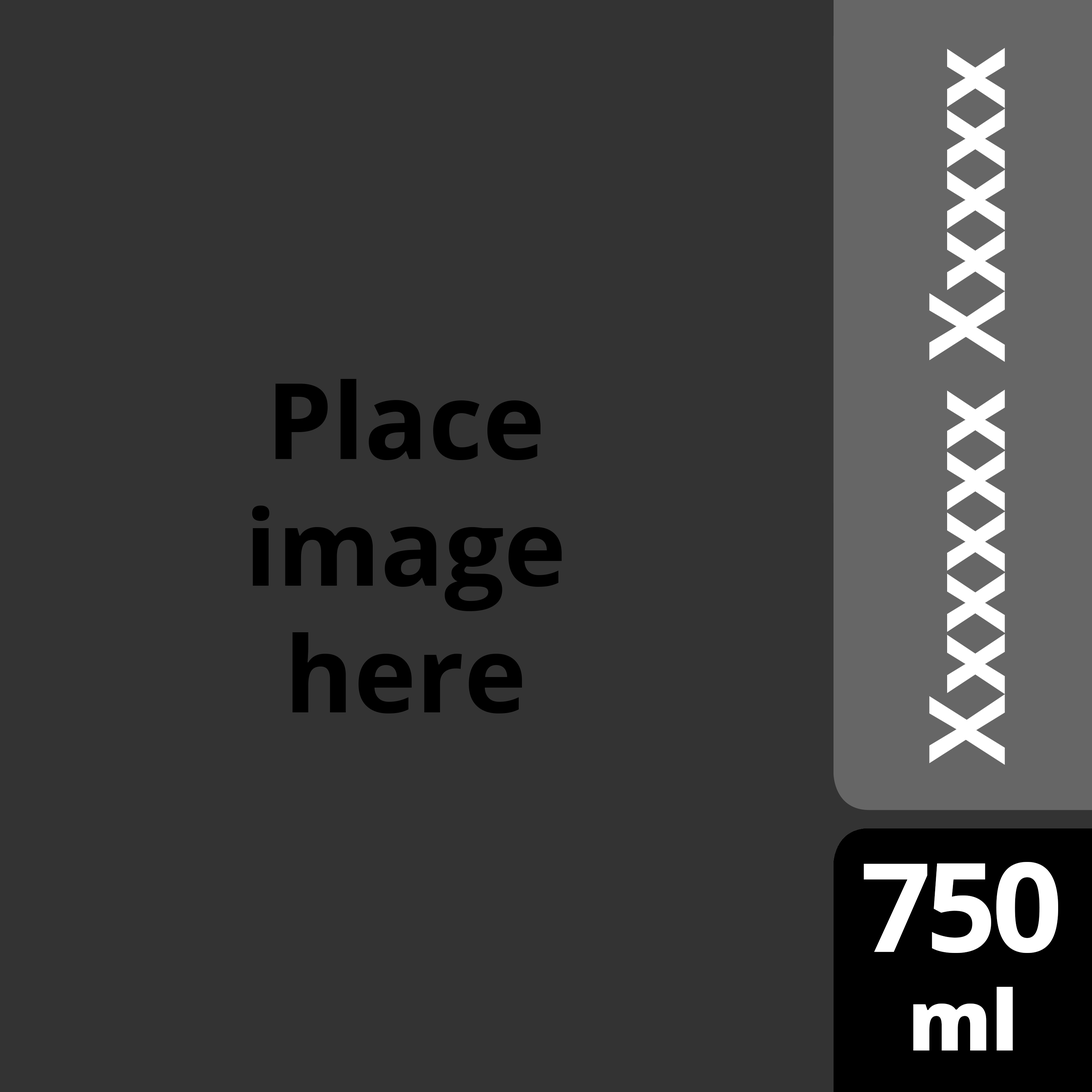
<style>
.page{position:relative;width:1092px;height:1092px;background:#333333}
.page>*{position:absolute;margin:0}
.t1{font:105.6px "OpenSans-Bold";color:#ffffff}
.t2{font:105.6px "OpenSans-Bold";color:#000000}
.t3{font:123.8px "OpenSans-Bold";letter-spacing:-0.04em;color:#ffffff;text-transform:uppercase}
.t4{font:83.6px "OpenSans-Extrabold";color:#ffffff}
</style>
<div class="page">
<p class="t1" style="left:929px;top:48px;width:76px;height:717px;rotate:-90deg">Xxxxxx Xxxxx</p>
<p class="t2" style="left:252px;top:379px;width:310px;height:334px;text-align:center">Place<br>image<br>here</p>
<p class="t3" style="left:864px;top:862px;width:194px;height:91px">750</p>
<p class="t4" style="left:913px;top:987px;width:100px;height:63px">ml</p>
</div>
